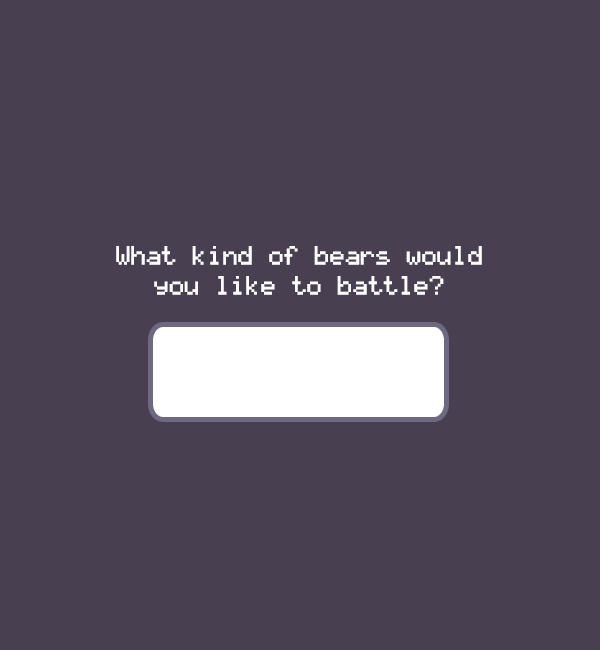
<style>
.page{position:relative;width:600px;height:650px;background:#484050}
.page>*{position:absolute;margin:0}
.t1{font:25px "LCDSolid";color:#ffffff}
</style>
<div class="page">
<p class="t1" style="left:116px;top:246px;width:366px;height:49px;text-align:center">What kind of bears would<br>you like to battle?</p>
</div>
